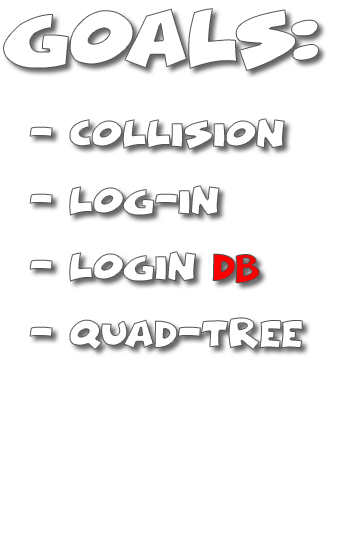
<style>
.page{position:relative;width:350px;height:540px;background:#ffffff}
.page>*{position:absolute;margin:0}
.t1{font:37.5px "ComicalCartoon";color:#ffffff}
.t2{font:18px/66.7px "ComicalCartoon";color:#ffffff}
.t3{font:18px/66.7px "ComicalCartoon";color:#fa0000}
</style>
<div class="page">
<p class="t1" style="left:3px;top:8px;width:316px;height:63px">Goals:</p>
<p class="t2" style="left:29px;top:118px;width:274px;height:232px">- Collision<br>- LoG-in<br>- LOGIN <span class="t3">DB<br></span>- Quad-Tree</p>
</div>
